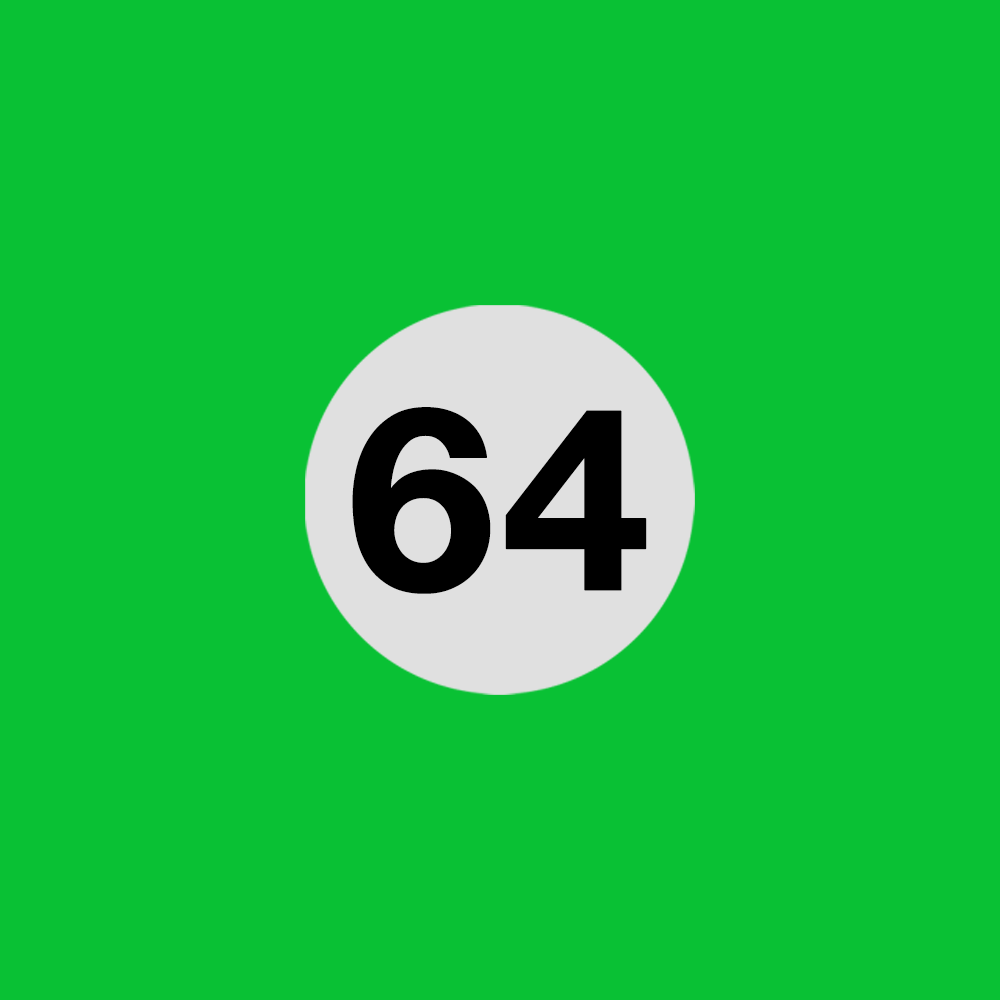
<style>
.page{position:relative;width:1000px;height:1000px;background:#09c134}
.page>*{position:absolute;margin:0}
.t1{font:255px "HelveticaNeue-Bold";color:#000000;font-weight:bold;scale:1.04 1}
</style>
<div class="page">
<p class="t1" style="left:352px;top:407px;width:295px;height:187px">64</p>
</div>
